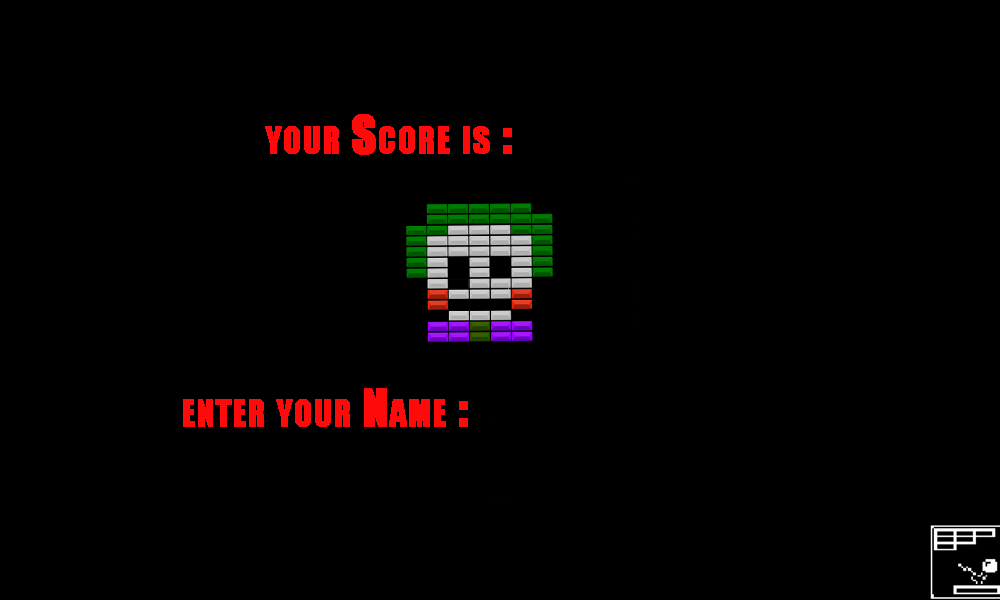
<style>
.page{position:relative;width:1000px;height:600px;background:#000000}
.page>*{position:absolute;margin:0}
.t1{font:48px "Impact";color:#fe0a0a;font-variant:small-caps;font-weight:bold}
.t2{font:48.2px "Impact";color:#fe0a0a;font-variant:small-caps;font-weight:bold}
</style>
<div class="page">
<p class="t1" style="left:265px;top:114px;width:247px;height:41px">your Score is :</p>
<p class="t2" style="left:183px;top:388px;width:285px;height:39px">enter your Name :</p>
</div>
